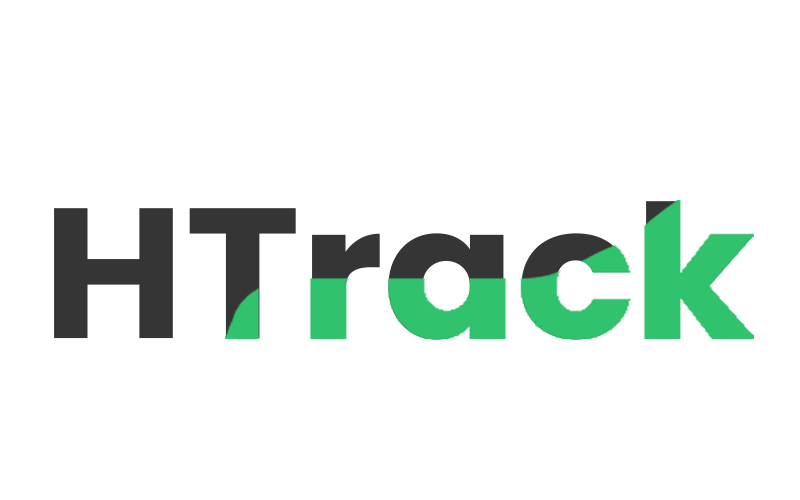
<style>
.page{position:relative;width:800px;height:500px;background:#ffffff}
.page>*{position:absolute;margin:0}
.t1{font:184.9px "Poppins-Bold";scale:1.06 1}
</style>
<div class="page">
<p class="t1" style="left:54px;top:201px;width:701px;height:139px">HTrack</p>
</div>
